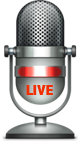
<style>
.page{position:relative;width:80px;height:141px;background:#ffffff}
.page>*{position:absolute;margin:0}
.t1{font:14px "AbadiMT-CondensedExtraBold";color:#f12d00;scale:1.19 1}
</style>
<div class="page">
<p class="t1" style="left:26px;top:85px;width:27px;height:10px">LIVE</p>
</div>
